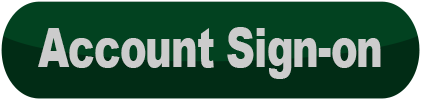
<style>
.page{position:relative;width:422px;height:100px;background:#024220}
.page>*{position:absolute;margin:0}
.t1{font:54.4px "Arial-Black";letter-spacing:-0.025em;color:#cccccc;scale:0.74 1}
</style>
<div class="page">
<p class="t1" style="left:38px;top:27px;width:343px;height:52px">Account Sign-on</p>
</div>
